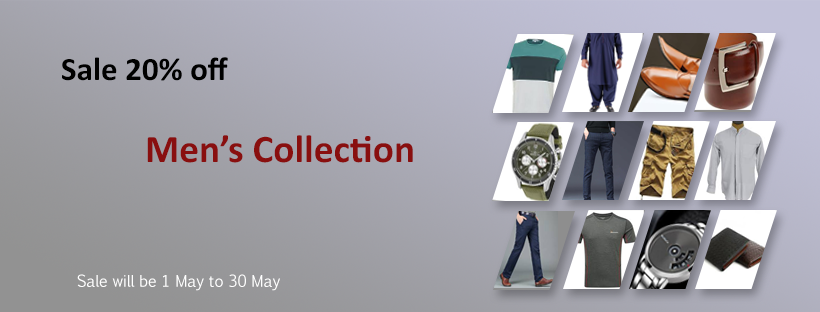
<style>
.page{position:relative;width:820px;height:312px}
.page>*{position:absolute;margin:0}
.t1{font:33px "Calibri-Bold";color:#000000}
.t2{font:39.2px "Calibri-Bold";color:#890f0f}
.t3{font:15.5px "EuphemiaCAS";color:#ffffff}
</style>
<div class="page">
<p class="t1" style="left:62px;top:57px;width:166px;height:24px">Sale 20% off</p>
<p class="t2" style="left:147px;top:135px;width:266px;height:28px">Men’s Collection</p>
<p class="t3" style="left:77px;top:274px;width:203px;height:17px">Sale will be 1 May to 30 May</p>
</div>
